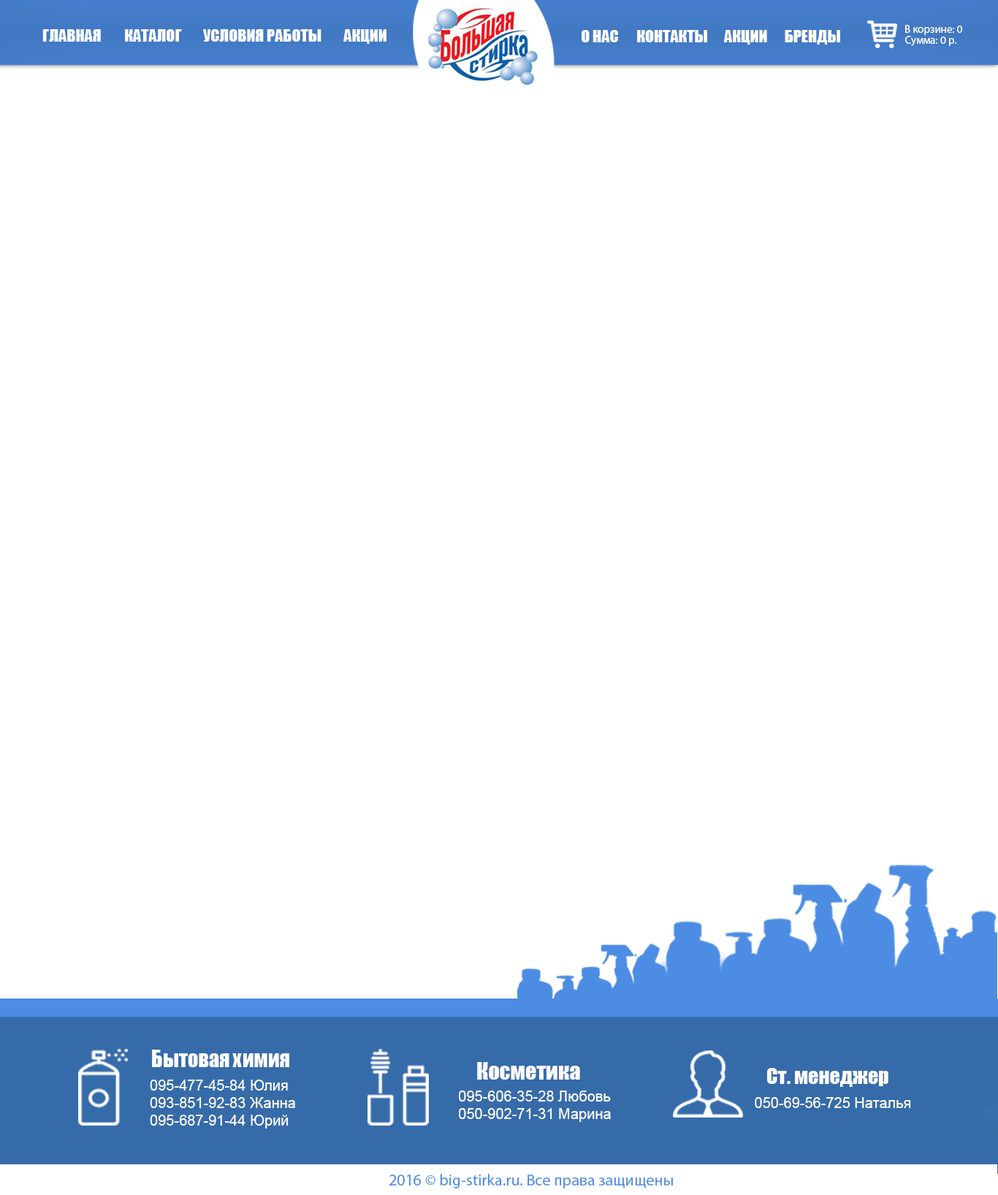
<style>
.page{position:relative;width:998px;height:1195px;background:#ffffff}
.page>*{position:absolute;margin:0}
.t1{font:16.1px "Impact";color:#ffffff}
.t2{font:11px "MyriadPro-Regular";color:#ffffff}
.t3{font:21.9px "Impact";color:#ffffff;scale:0.94 1}
.t4{font:21.9px "Impact";color:#ffffff}
.t5{font:20.5px "Impact";color:#ffffff}
.t6{font:14.6px/17.5px "ArialMT";color:#ffffff}
.t7{font:14.6px "ArialMT";color:#ffffff}
.t8{font:16.1px "MyriadPro-Regular";color:#4c8ce3}
</style>
<div class="page">
<p class="t1" style="left:42px;top:29px;width:344px;height:15px">ГЛАВНАЯ   КАТАЛОГ  УСЛОВИЯ РАБОТЫ      АКЦИИ</p>
<p class="t1" style="left:581px;top:30px;width:259px;height:15px">О НАС  КОНТАКТЫ     АКЦИИ      БРЕНДЫ</p>
<p class="t2" style="left:905px;top:25px;width:57px;height:10px">В корзине: 0</p>
<p class="t2" style="left:905px;top:36px;width:51px;height:10px">Сумма: 0 р.</p>
<p class="t3" style="left:152px;top:1050px;width:137px;height:17px">Бытовая химия</p>
<p class="t4" style="left:477px;top:1062px;width:103px;height:18px">Косметика</p>
<p class="t5" style="left:767px;top:1068px;width:121px;height:19px">Ст. менеджер</p>
<p class="t6" style="left:150px;top:1080px;width:145px;height:49px">095-477-45-84 Юлия<br>093-851-92-83 Жанна<br>095-687-91-44 Юрий</p>
<p class="t6" style="left:459px;top:1091px;width:152px;height:31px">095-606-35-28 Любовь         <br>050-902-71-31 Марина</p>
<p class="t7" style="left:755px;top:1097px;width:156px;height:11px">050-69-56-725 Наталья</p>
<p class="t8" style="left:389px;top:1174px;width:284px;height:14px">2016 © big-stirka.ru. Все права защищены</p>
</div>
